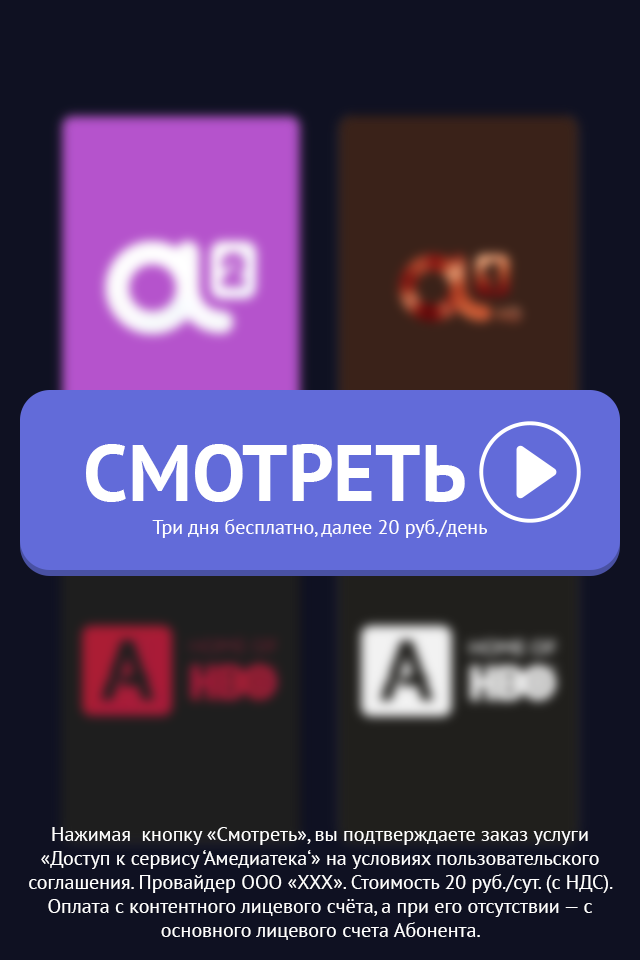
<style>
.page{position:relative;width:640px;height:960px;background:#0f1122}
.page>*{position:absolute;margin:0}
.t1{font:80px "PTSans-Bold";color:#ffffff;text-transform:uppercase}
.t2{font:20px "PTSans-Regular";color:#ffffff}
</style>
<div class="page">
<p class="t1" style="left:86px;top:444px;width:379px;height:58px">Смотреть</p>
<p class="t2" style="left:152px;top:519px;width:335px;height:19px">Три дня бесплатно, далее 20 руб./день</p>
<p class="t2" style="left:29px;top:827px;width:584px;height:113px;text-align:center">Нажимая  кнопку «Смотреть», вы подтверждаете заказ услуги «Доступ к сервису ‘Амедиатека‘» на условиях пользовательского соглашения. Провайдер ООО «ХХХ». Стоимость 20 руб./сут. (с НДС). Оплата с контентного лицевого счёта, а при его отсутствии — с основного лицевого счета Абонента.</p>
</div>
